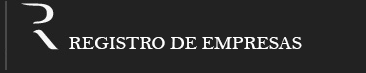
<style>
.page{position:relative;width:366px;height:73px;background:#222222}
.page>*{position:absolute;margin:0}
.t1{font:19px "BellMT";color:#ffffff}
</style>
<div class="page">
<p class="t1" style="left:69px;top:37px;width:233px;height:12px">REGISTRO DE EMPRESAS</p>
</div>
